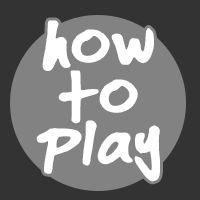
<style>
.page{position:relative;width:200px;height:200px;background:#828282}
.page>*{position:absolute;margin:0}
.t1{font:72px/50px "emilyyyyyy";color:#ffffff}
</style>
<div class="page">
<p class="t1" style="left:36px;top:20px;width:124px;height:162px;text-align:center">how<br>to<br>play</p>
</div>
